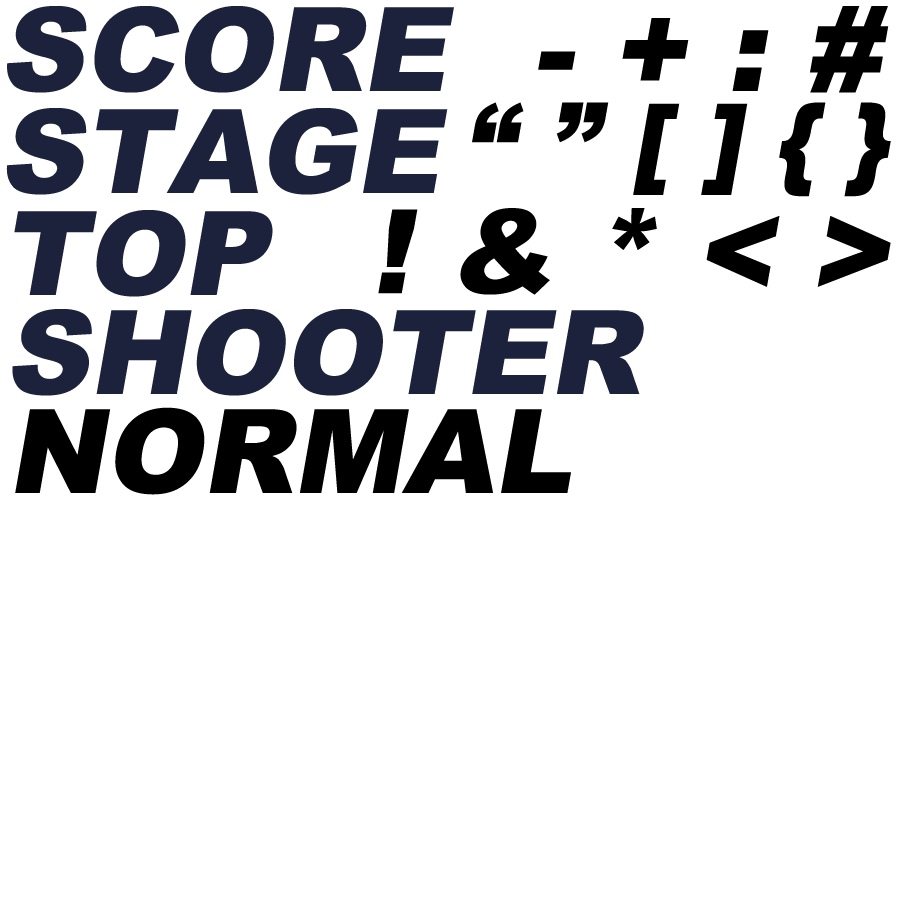
<style>
.page{position:relative;width:900px;height:900px;background:#ffffff}
.page>*{position:absolute;margin:0}
.t1{font:116.7px "Arial-Black";color:#1c223c;font-style:italic}
.t2{font:116.7px "Arial-Black";color:#000000;font-style:italic}
.t3{font:100px "Arial-Black";color:#000000;font-style:italic}
</style>
<div class="page">
<p class="t1" style="left:7px;top:6px;width:447px;height:87px">SCORE</p>
<p class="t2" style="left:538px;top:6px;width:351px;height:87px">- + : #</p>
<p class="t3" style="left:472px;top:102px;width:419px;height:95px">“ ” [ ] { }</p>
<p class="t1" style="left:6px;top:108px;width:442px;height:87px">STAGE</p>
<p class="t2" style="left:378px;top:208px;width:513px;height:87px">! &amp; * &lt; &gt;</p>
<p class="t1" style="left:14px;top:210px;width:259px;height:87px">TOP</p>
<p class="t1" style="left:12px;top:309px;width:632px;height:87px">SHOOTER</p>
<p class="t2" style="left:15px;top:407px;width:556px;height:88px">NORMAL</p>
</div>
